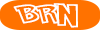
<style>
.page{position:relative;width:100px;height:30px;background:#ff7200}
.page>*{position:absolute;margin:0}
.t1{font:20px "PokemonHollowNormal";letter-spacing:0.01em;color:#ffffff;font-weight:bold;scale:1.64 1}
</style>
<div class="page">
<p class="t1" style="left:13px;top:3px;width:65px;height:25px">BRN</p>
</div>
